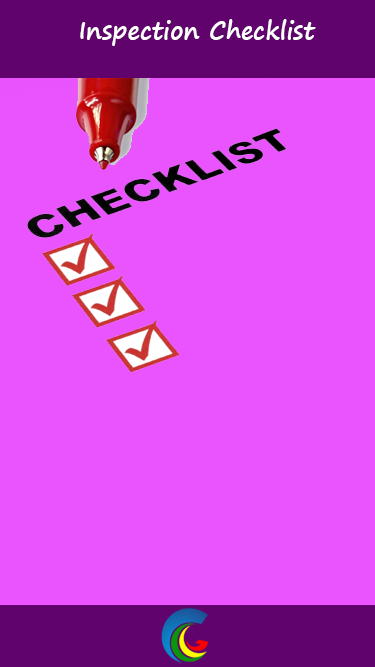
<style>
.page{position:relative;width:375px;height:667px;background:#ea54ff}
.page>*{position:absolute;margin:0}
.t1{font:24px "SegoePrint-Bold";color:#ffffff}
</style>
<div class="page">
<p class="t1" style="left:80px;top:19px;width:236px;height:27px">Inspection Checklist</p>
</div>
